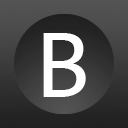
<style>
.page{position:relative;width:128px;height:128px}
.page>*{position:absolute;margin:0}
.t1{font:100px "Consolas";color:#ffffff}
</style>
<div class="page">
<p class="t1" style="left:43px;top:33px;width:43px;height:64px">B</p>
</div>
